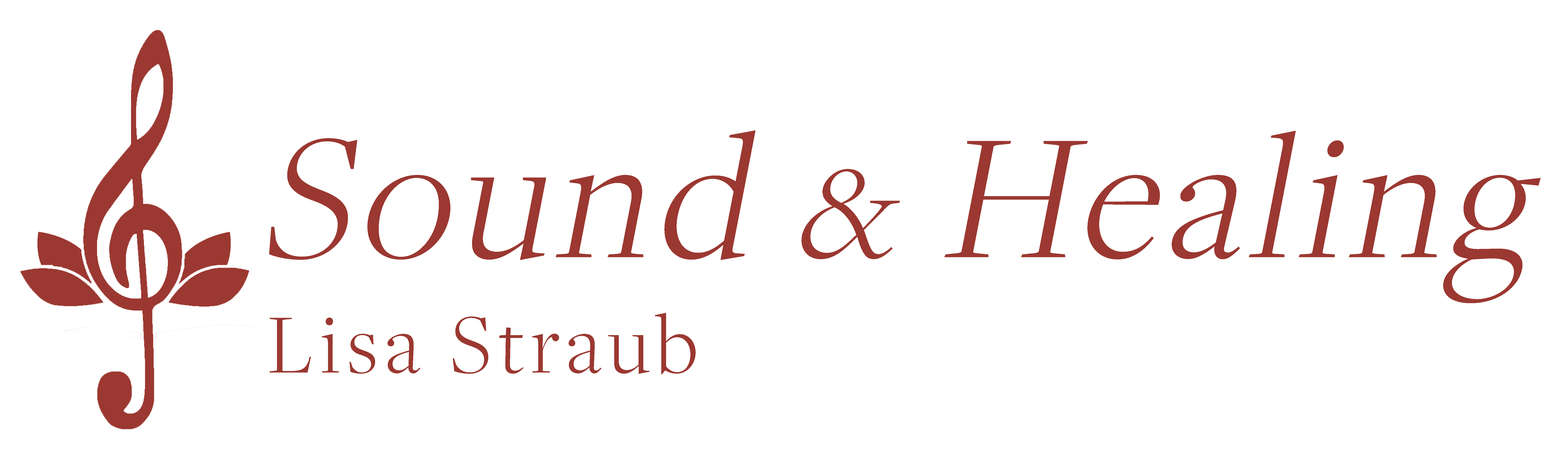
<style>
.page{position:relative;width:1568px;height:459px;background:#ffffff}
.page>*{position:absolute;margin:0}
.t1{font:185.7px "FreightDispProLight-Regular";letter-spacing:0.05em;color:#9b3831;font-style:italic}
.t2{font:137.5px "FreightDispProLight-Regular";letter-spacing:0.05em;color:#9b3831;font-style:italic}
.t3{font:87.6px "FreightDispProLight-Regular";letter-spacing:0.08em;color:#9b3831}
</style>
<div class="page">
<p class="t1" style="left:269px;top:131px;width:1272px;height:172px">Sound <span class="t2">&amp;</span> Healing</p>
<p class="t3" style="left:270px;top:313px;width:426px;height:61px">Lisa Straub</p>
</div>
